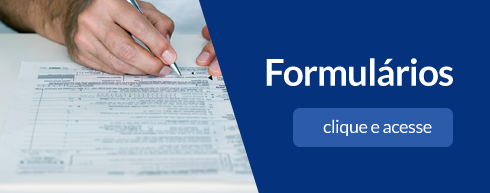
<style>
.page{position:relative;width:490px;height:193px;background:#05327d}
.page>*{position:absolute;margin:0}
.t1{font:36.9px "Lato-Bold";letter-spacing:-0.025em;color:#ffffff}
.t2{font:18px "Lato-Regular";letter-spacing:-0.025em;color:#ffffff}
</style>
<div class="page">
<p class="t1" style="left:266px;top:58px;width:187px;height:28px">Formulários</p>
<p class="t2" style="left:323px;top:119px;width:109px;height:17px">clique e acesse</p>
</div>
